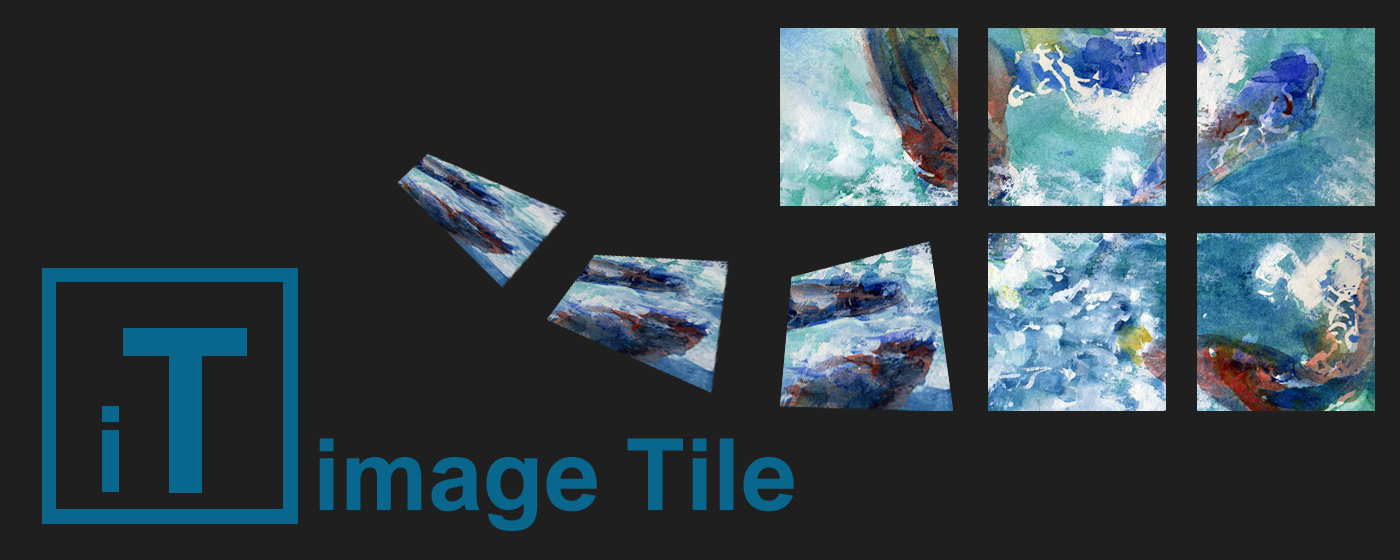
<style>
.page{position:relative;width:1400px;height:560px;background:#1f1f1f}
.page>*{position:absolute;margin:0}
.t1{font:99.6px "ArialNova-Bold";color:#09678d}
</style>
<div class="page">
<p class="t1" style="left:319px;top:438px;width:475px;height:93px">image Tile</p>
</div>
